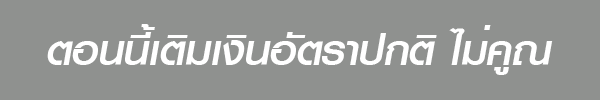
<style>
.page{position:relative;width:600px;height:100px;background:#8f918f}
.page>*{position:absolute;margin:0}
.t1{font:60px "PSLKandaModernExtra";color:#ffffff;font-style:italic}
</style>
<div class="page">
<p class="t1" style="left:47px;top:24px;width:506px;height:51px">ตอนนี้เติมเงินอัตราปกติ ไม่คูณ</p>
</div>
